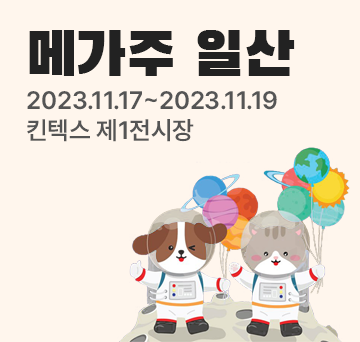
<style>
.page{position:relative;width:360px;height:342px;background:#fff6ed}
.page>*{position:absolute;margin:0}
.t1{font:60px "BlackHanSans-Regular";color:#222222}
.t2{font:25px/30px "Pretendard-SemiBold";letter-spacing:-0.004em;color:#555555}
</style>
<div class="page">
<p class="t1" style="left:29px;top:30px;width:266px;height:46px">메가주 일산</p>
<p class="t2" style="left:27px;top:91px;width:250px;height:51px">2023.11.17~2023.11.19<br>킨텍스 제1전시장</p>
</div>
